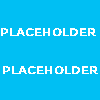
<style>
.page{position:relative;width:100px;height:100px;background:#00bff3}
.page>*{position:absolute;margin:0}
.t1{font:11px "Montserrat-Regular";color:#ffffff;font-weight:bold}
</style>
<div class="page">
<p class="t1" style="left:1px;top:28px;width:95px;height:8px">PLACEHOLDER</p>
<p class="t1" style="left:3px;top:66px;width:95px;height:8px">PLACEHOLDER</p>
</div>
